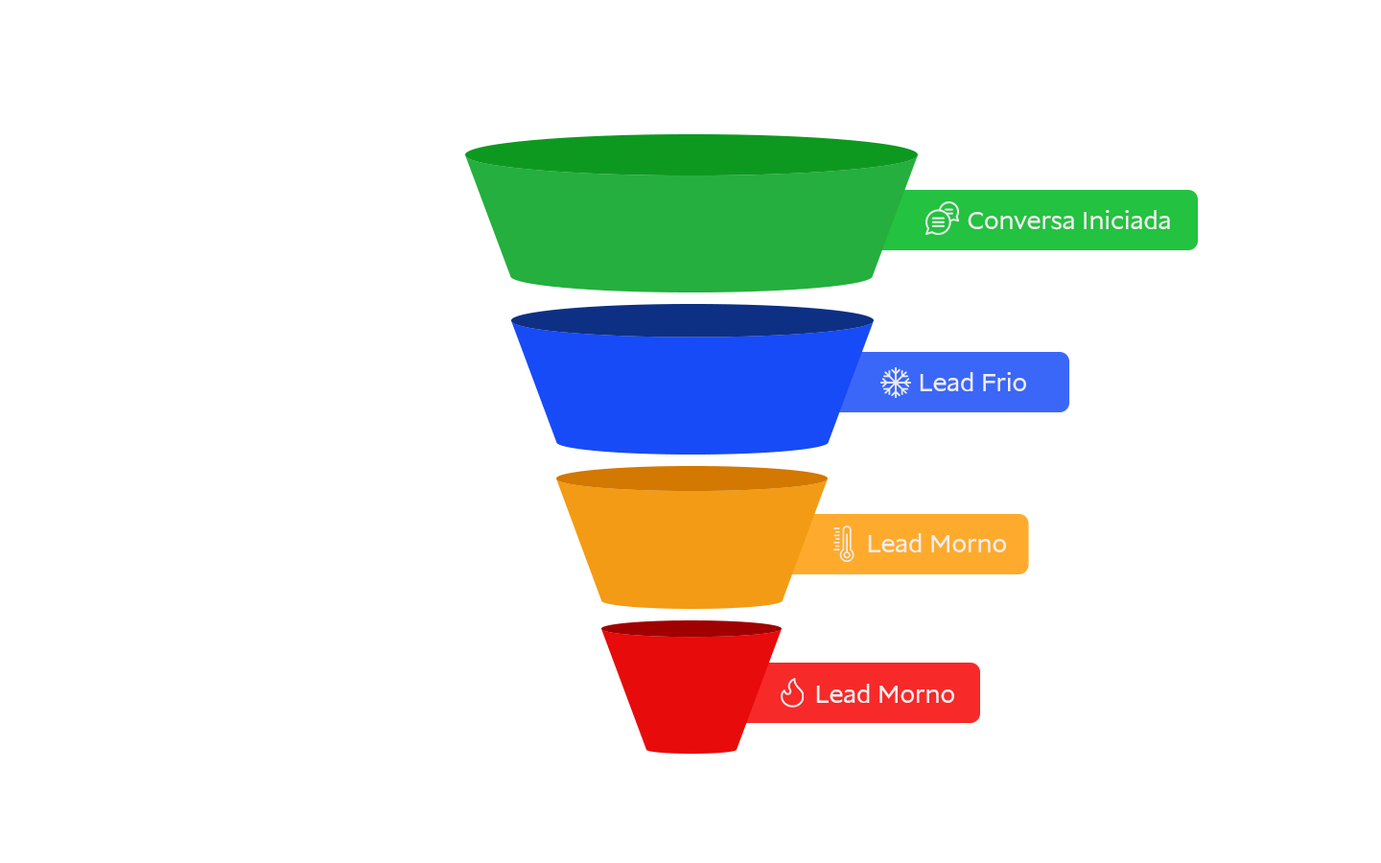
<style>
.page{position:relative;width:1381px;height:863px;background:#ffffff}
.page>*{position:absolute;margin:0}
.t1{font:26.9px "Matimo-Regular";color:#efefef}
</style>
<div class="page">
<p class="t1" style="left:968px;top:210px;width:202px;height:20px">Conversa Iniciada</p>
<p class="t1" style="left:920px;top:372px;width:106px;height:19px">Lead Frio</p>
<p class="t1" style="left:868px;top:533px;width:138px;height:20px">Lead Morno</p>
<p class="t1" style="left:816px;top:684px;width:138px;height:19px">Lead Morno</p>
</div>
